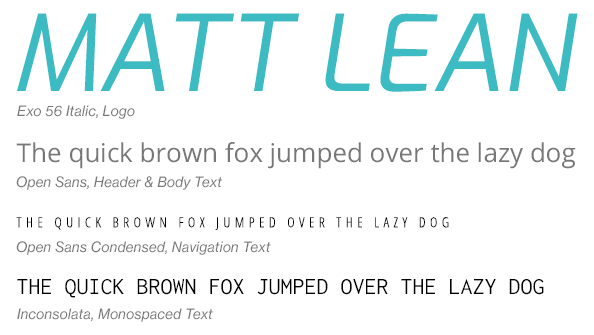
<style>
.page{position:relative;width:594px;height:335px;background:#ffffff}
.page>*{position:absolute;margin:0}
.t1{font:105px "Exo-Italic";color:#3dbbc2}
.t2{font:14px "NHaasGroteskTXPro-56It";color:#777777}
.t3{font:26px "OpenSans-Regular";color:#777777}
.t4{font:14px "OpenSansCondensed-Light";letter-spacing:0.32em;color:#000000;text-transform:uppercase}
.t5{font:24px "Inconsolata-Regular";color:#000000;text-transform:uppercase}
</style>
<div class="page">
<p class="t1" style="left:17px;top:13px;width:561px;height:79px">MATT LEAN</p>
<p class="t2" style="left:17px;top:105px;width:118px;height:14px">Exo 56 Italic, Logo</p>
<p class="t3" style="left:16px;top:142px;width:560px;height:27px">The quick brown fox jumped over the lazy dog</p>
<p class="t2" style="left:16px;top:176px;width:206px;height:14px">Open Sans, Header &amp; Body Text</p>
<p class="t4" style="left:16px;top:217px;width:433px;height:13px">THE QUICK BROWN FOX JUMPED OVER THE LAZY DOG</p>
<p class="t2" style="left:16px;top:241px;width:255px;height:14px">Open Sans Condensed, Navigation Text</p>
<p class="t5" style="left:17px;top:279px;width:527px;height:19px">THE QUICK BROWN FOX JUMPED OVER THE LAZY DOG</p>
<p class="t2" style="left:17px;top:308px;width:196px;height:14px">Inconsolata, Monospaced Text</p>
</div>
